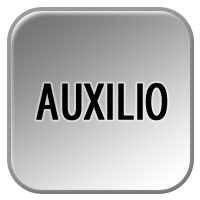
<style>
.page{position:relative;width:200px;height:200px}
.page>*{position:absolute;margin:0}
.t1{font:52.8px "MyriadPro-Cond";letter-spacing:-0.02em;color:#000000;text-transform:uppercase;font-weight:bold}
</style>
<div class="page">
<p class="t1" style="left:36px;top:83px;width:132px;height:38px">Auxilio</p>
</div>
